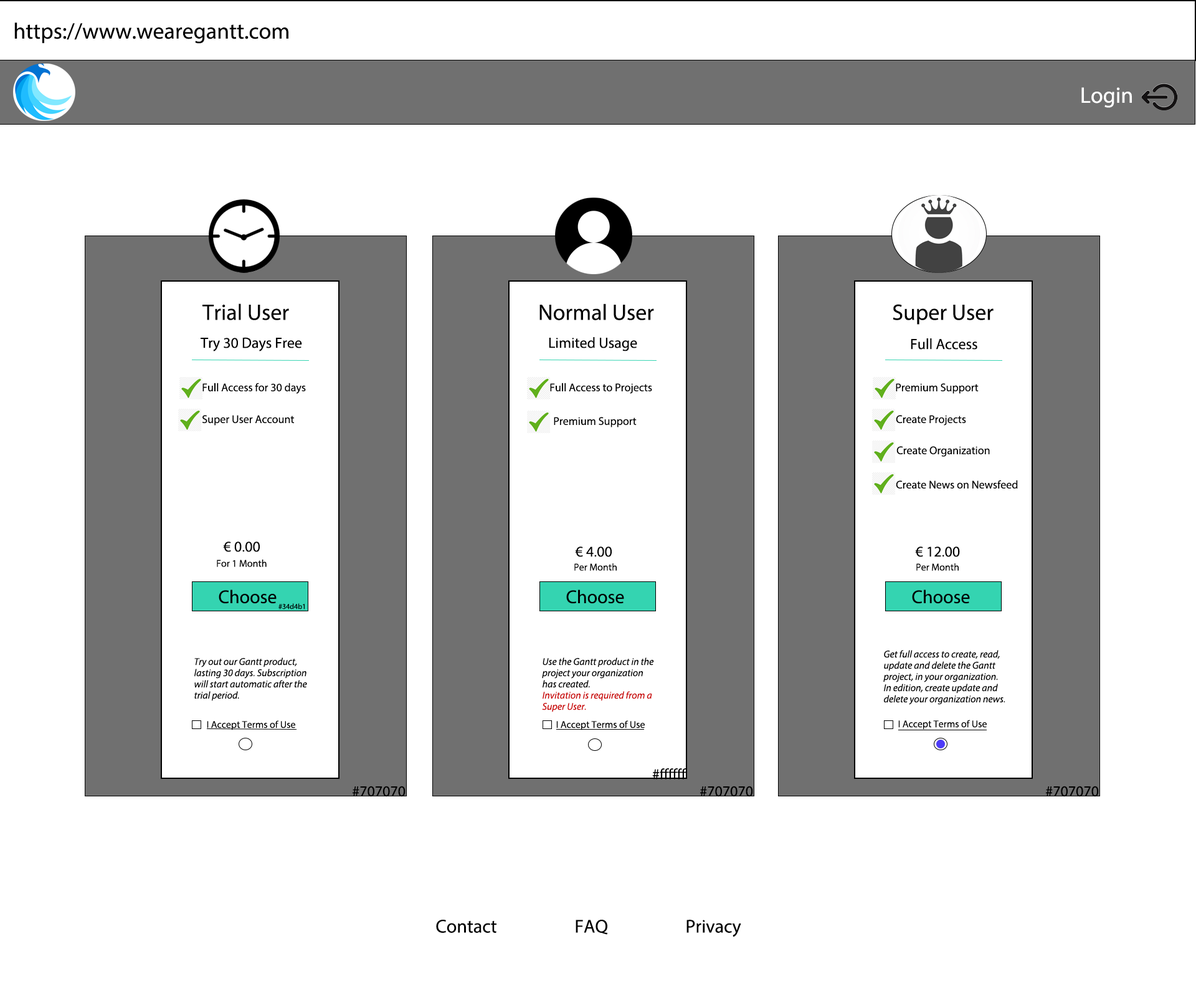
<style>
.page{position:relative;width:1196px;height:997px;background:#ffffff}
.page>*{position:absolute;margin:0}
.t1{font:22.4px "MyriadPro-Regular";color:#000000}
.t2{font:22.4px "MyriadPro-Regular";color:#ffffff}
.t3{font:15px "MyriadPro-Regular";color:#000000}
.t4{font:11.2px "MyriadPro-Regular";color:#000000}
.t5{font:10px "MyriadPro-Regular";color:#000000}
.t6{font:18.7px "MyriadPro-Regular";color:#000000}
.t7{font:7.5px "MyriadPro-Regular";color:#000000}
.t8{font:10px/11.2px "MyriadPro-It";color:#000000}
.t9{font:10px/11.2px "MyriadPro-It";color:#ca0000}
</style>
<div class="page">
<p class="t1" style="left:14px;top:22px;width:274px;height:22px">https://www.wearegantt.com</p>
<p class="t2" style="left:1082px;top:87px;width:50px;height:21px">Login</p>
<p class="t1" style="left:202px;top:303px;width:87px;height:17px">Trial User</p>
<p class="t1" style="left:540px;top:303px;width:114px;height:17px">Normal User</p>
<p class="t1" style="left:893px;top:304px;width:101px;height:21px">Super User</p>
<p class="t3" style="left:201px;top:337px;width:101px;height:14px">Try 30 Days Free</p>
<p class="t3" style="left:549px;top:337px;width:88px;height:14px">Limited Usage</p>
<p class="t3" style="left:911px;top:338px;width:67px;height:12px">Full Access</p>
<p class="t4" style="left:202px;top:383px;width:104px;height:11px">Full Access for 30 days</p>
<p class="t4" style="left:550px;top:383px;width:102px;height:11px">Full Access to Projects</p>
<p class="t4" style="left:896px;top:383px;width:83px;height:11px">Premium Support</p>
<p class="t4" style="left:202px;top:415px;width:92px;height:11px">Super User Account</p>
<p class="t4" style="left:554px;top:417px;width:83px;height:10px">Premium Support</p>
<p class="t4" style="left:896px;top:415px;width:70px;height:11px">Create Projects</p>
<p class="t4" style="left:897px;top:446px;width:93px;height:11px">Create Organization</p>
<p class="t4" style="left:896px;top:480px;width:122px;height:8px">Create News on Newsfeed</p>
<p class="t3" style="left:223px;top:541px;width:37px;height:11px">€ 0.00</p>
<p class="t3" style="left:575px;top:546px;width:37px;height:11px">€ 4.00</p>
<p class="t3" style="left:915px;top:546px;width:45px;height:11px">€ 12.00</p>
<p class="t5" style="left:217px;top:559px;width:50px;height:8px">For 1 Month</p>
<p class="t5" style="left:574px;top:563px;width:43px;height:8px">Per Month</p>
<p class="t5" style="left:916px;top:563px;width:43px;height:8px">Per Month</p>
<p class="t6" style="left:219px;top:589px;width:58px;height:15px">Choose</p>
<p class="t6" style="left:566px;top:589px;width:58px;height:15px">Choose</p>
<p class="t6" style="left:912px;top:589px;width:58px;height:15px">Choose</p>
<p class="t7" style="left:278px;top:603px;width:27px;height:6px">#34d4b1</p>
<p class="t8" style="left:883px;top:650px;width:123px;height:55px">Get full access to create, read,<br>update and delete the Gantt<br>project, in your organization.<br>In edition, create update and<br>delete your organization news.</p>
<p class="t8" style="left:194px;top:657px;width:113px;height:44px">Try out our Gantt product,<br>lasting 30 days. Subscription<br>will start automatic after the<br>trial period.</p>
<p class="t8" style="left:542px;top:657px;width:112px;height:55px">Use the Gantt product in the <br>project your organization<br>has created. <br><span class="t9">Invitation is required from a<br>Super User.</span></p>
<p class="t5" style="left:207px;top:720px;width:88px;height:10px">I Accept Terms of Use</p>
<p class="t5" style="left:556px;top:720px;width:89px;height:10px">I Accept Terms of Use</p>
<p class="t5" style="left:898px;top:720px;width:89px;height:10px">I Accept Terms of Use</p>
<p class="t3" style="left:652px;top:768px;width:35px;height:11px">#ffffff</p>
<p class="t3" style="left:353px;top:786px;width:53px;height:11px">#707070</p>
<p class="t3" style="left:700px;top:786px;width:53px;height:11px">#707070</p>
<p class="t3" style="left:1046px;top:786px;width:53px;height:11px">#707070</p>
<p class="t6" style="left:436px;top:920px;width:61px;height:13px">Contact</p>
<p class="t6" style="left:576px;top:920px;width:32px;height:15px">FAQ</p>
<p class="t6" style="left:687px;top:920px;width:54px;height:17px">Privacy</p>
</div>
